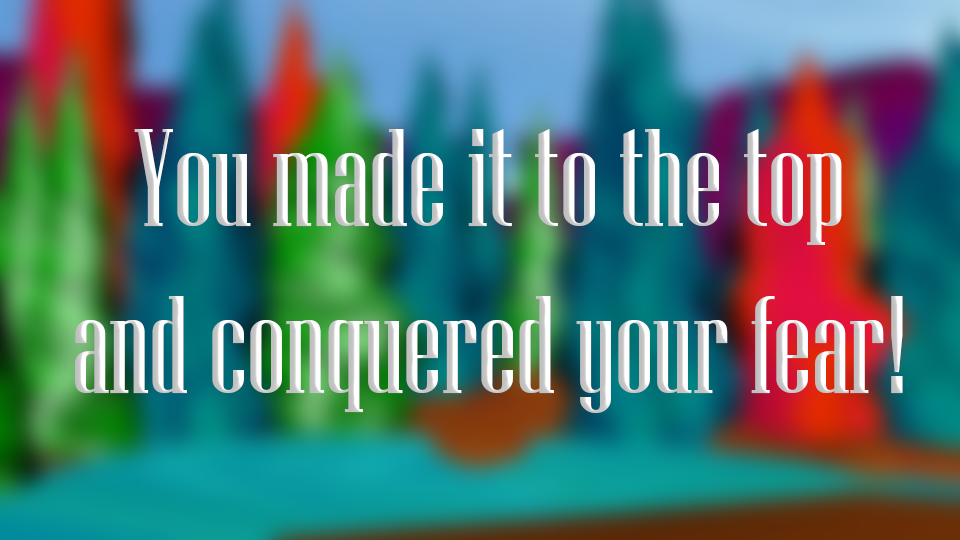
<style>
.page{position:relative;width:960px;height:540px}
.page>*{position:absolute;margin:0}
.t1{font:139px "NiagaraSolid-Reg"}
</style>
<div class="page">
<p class="t1" style="left:75px;top:129px;width:828px;height:284px;text-align:center">You made it to the top <br>and conquered your fear!</p>
</div>
